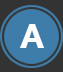
<style>
.page{position:relative;width:63px;height:72px;background:#3e7da9}
.page>*{position:absolute;margin:0}
.t1{font:36.3px "Amaranth-Bold";color:#ffffff}
</style>
<div class="page">
<p class="t1" style="left:20px;top:24px;width:25px;height:24px">A</p>
</div>
